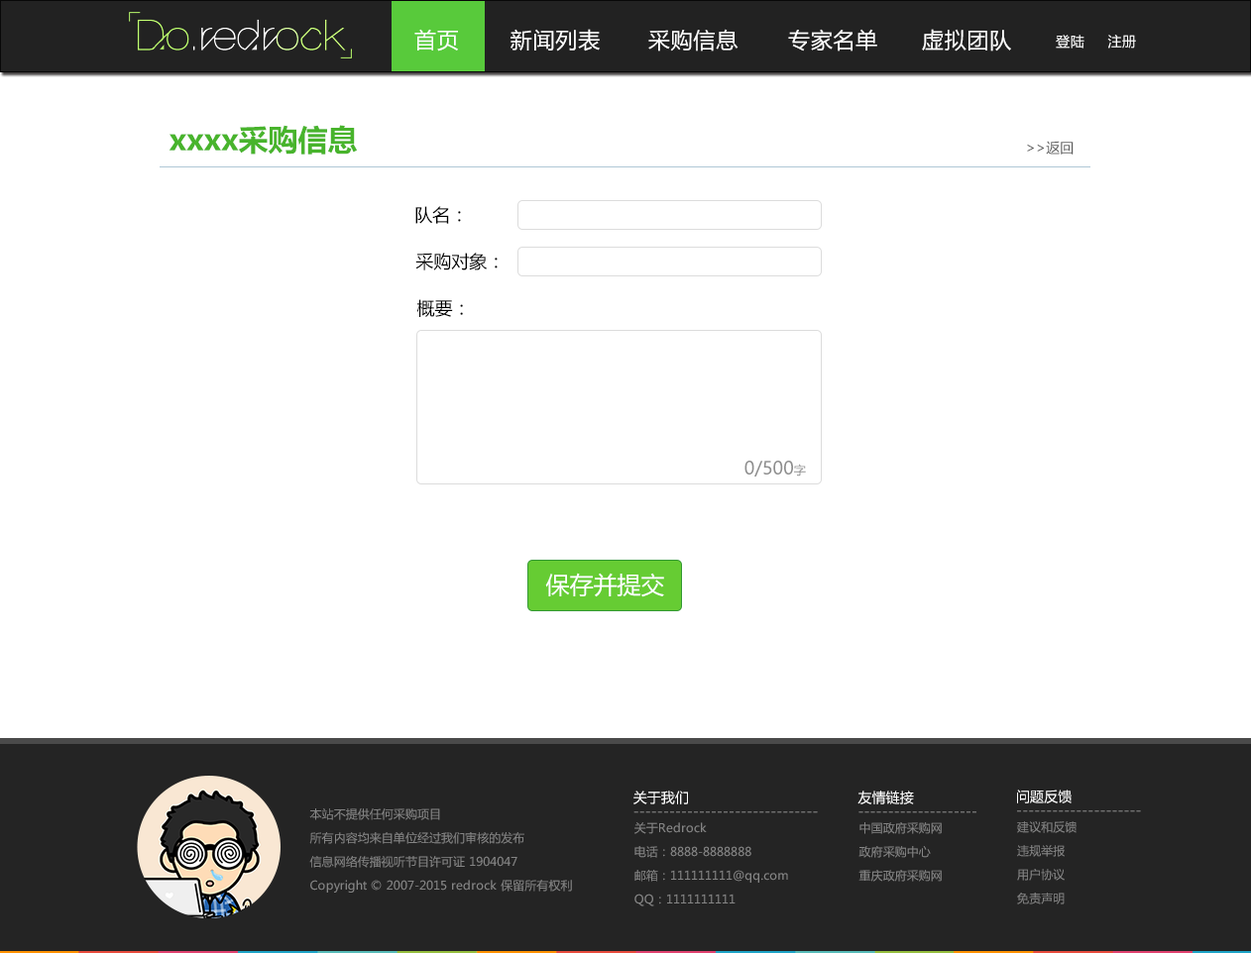
<style>
.page{position:relative;width:1251px;height:953px;background:#ffffff}
.page>*{position:absolute;margin:0}
.t1{font:21.8px "MicrosoftYaHei";letter-spacing:0.035em;color:#ffffff}
.t2{font:13.9px "MicrosoftYaHei";letter-spacing:0.035em;color:#ffffff}
.t3{font:29.7px "MicrosoftYaHei-Bold";color:#48b42c}
.t4{font:13.9px "MicrosoftYaHei";color:#5b5b5b}
.t5{font:17.8px "MicrosoftYaHeiUI";color:#000000}
.t6{font:17.8px "MicrosoftYaHeiUI";color:#8e8e8e}
.t7{font:11.9px "MicrosoftYaHeiUI";color:#8e8e8e}
.t8{font:23.8px "MicrosoftYaHeiUI";color:#ffffff}
.t9{font:13.9px "MicrosoftYaHei";color:#ffffff}
.t10{font:11.9px/23.8px "MicrosoftYaHei";color:#858585}
.t11{font:13.9px "MicrosoftYaHei";color:#858585}
</style>
<div class="page">
<p class="t1" style="left:414px;top:29px;width:44px;height:23px">首页</p>
<p class="t1" style="left:510px;top:29px;width:90px;height:23px">新闻列表</p>
<p class="t1" style="left:648px;top:29px;width:90px;height:23px">采购信息</p>
<p class="t1" style="left:788px;top:29px;width:89px;height:23px">专家名单</p>
<p class="t1" style="left:922px;top:29px;width:89px;height:23px">虚拟团队</p>
<p class="t2" style="left:1055px;top:35px;width:81px;height:14px">登陆     注册</p>
<p class="t3" style="left:168px;top:125px;width:189px;height:30px">xxxx采购信息</p>
<p class="t4" style="left:1027px;top:141px;width:46px;height:14px">&gt;&gt;返回</p>
<p class="t5" style="left:415px;top:206px;width:46px;height:18px">队名：</p>
<p class="t5" style="left:415px;top:253px;width:83px;height:18px">采购对象：</p>
<p class="t5" style="left:416px;top:299px;width:47px;height:18px">概要：</p>
<p class="t6" style="left:744px;top:461px;width:62px;height:16px">0/500<span class="t7">字</span></p>
<p class="t8" style="left:545px;top:573px;width:119px;height:25px">保存并提交</p>
<p class="t9" style="left:633px;top:791px;width:55px;height:14px">关于我们</p>
<p class="t9" style="left:857px;top:791px;width:57px;height:14px">友情链接</p>
<p class="t9" style="left:1017px;top:790px;width:54px;height:14px">问题反馈</p>
<p class="t10" style="left:309px;top:809px;width:263px;height:84px">本站不提供任何采购项目<br>所有内容均来自单位经过我们审核的发布<br>信息网络传播视听节目许可证 1904047<br>Copyright © 2007-2015 redrock 保留所有权利</p>
<p class="t11" style="left:633px;top:812px;width:185px;height:2px">-------------------------------</p>
<p class="t11" style="left:858px;top:812px;width:118px;height:2px">--------------------</p>
<p class="t11" style="left:1017px;top:811px;width:124px;height:2px">---------------------</p>
<p class="t10" style="left:1017px;top:822px;width:59px;height:83px">建议和反馈<br>违规举报<br>用户协议<br>免责声明</p>
<p class="t10" style="left:634px;top:823px;width:154px;height:84px">关于Redrock<br>电话：8888-8888888<br>邮箱：111111111@qq.com<br>QQ：1111111111</p>
<p class="t10" style="left:858px;top:823px;width:84px;height:59px">中国政府采购网<br>政府采购中心<br>重庆政府采购网</p>
</div>
